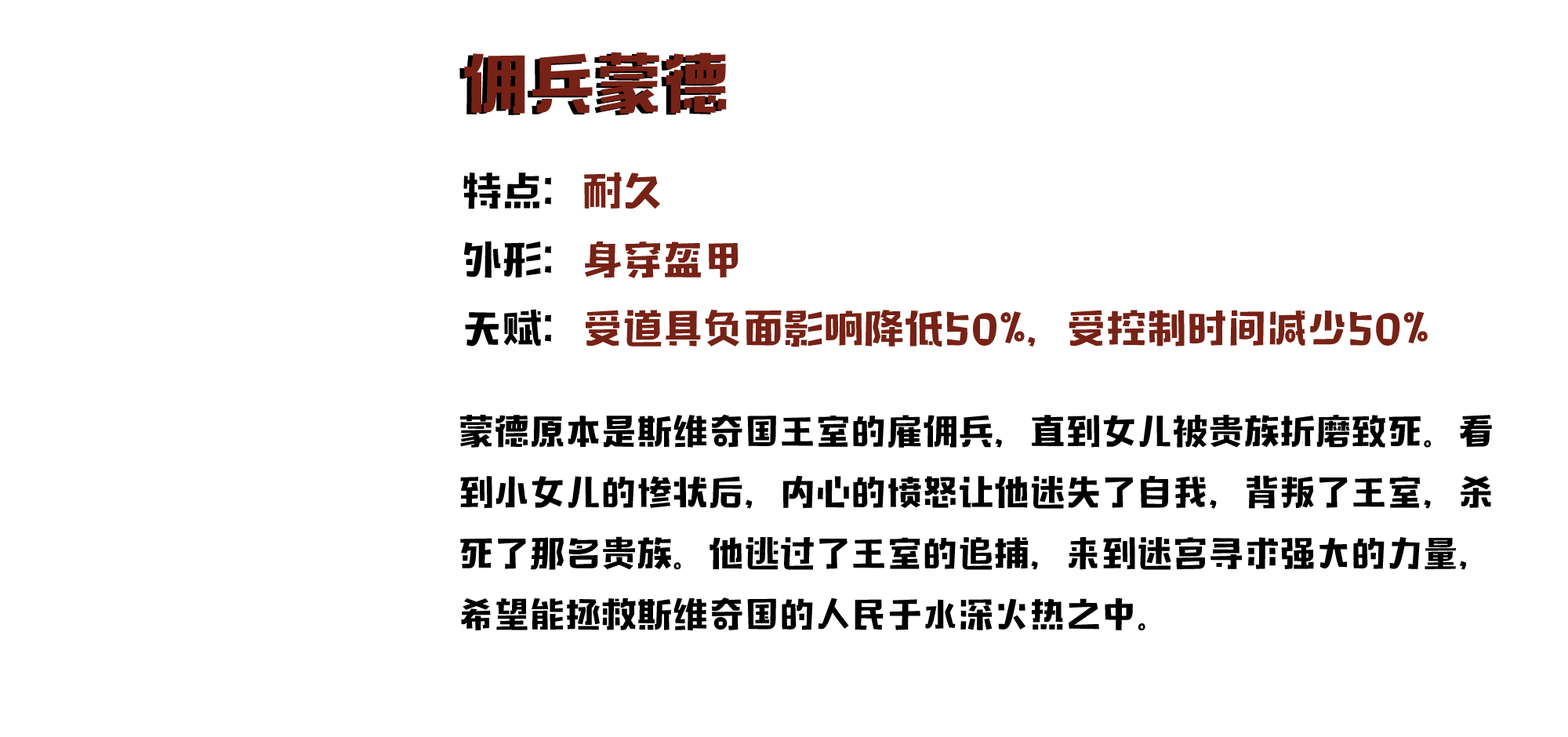
<style>
.page{position:relative;width:1568px;height:737px;background:#ffffff}
.page>*{position:absolute;margin:0}
.t1{font:65.3px "MF-TongXin(Noncommercial)-Regular";letter-spacing:0.025em}
.t2{font:65.3px "MF-TongXin(Noncommercial)-Regular";letter-spacing:0.025em;color:#772216}
.t3{font:39.2px "MF-TongXin(Noncommercial)-Regular";letter-spacing:0.025em;color:#772216}
.t4{font:39.2px "MF-TongXin(Noncommercial)-Regular";letter-spacing:0.025em;color:#000000}
.t5{font:34.8px "MF-TongXin(Noncommercial)-Regular";letter-spacing:0.025em;color:#000000}
</style>
<div class="page">
<p class="t1" style="left:459px;top:53px;width:263px;height:62px">佣兵蒙德</p>
<p class="t2" style="left:464px;top:52px;width:263px;height:62px">佣兵蒙德</p>
<p class="t3" style="left:463px;top:172px;width:965px;height:175px"><span class="t4">特点：</span>耐久<br><span class="t4">外形：</span>身穿盔甲<br><span class="t4">天赋：</span>受道具负面影响降低50%，受控制时间减少50%</p>
<p class="t5" style="left:460px;top:414px;width:1032px;height:216px">蒙德原本是斯维奇国王室的雇佣兵，直到女儿被贵族折磨致死。看到小女儿的惨状后，内心的愤怒让他迷失了自我，背叛了王室，杀死了那名贵族。他逃过了王室的追捕，来到迷宫寻求强大的力量，希望能拯救斯维奇国的人民于水深火热之中。</p>
</div>
